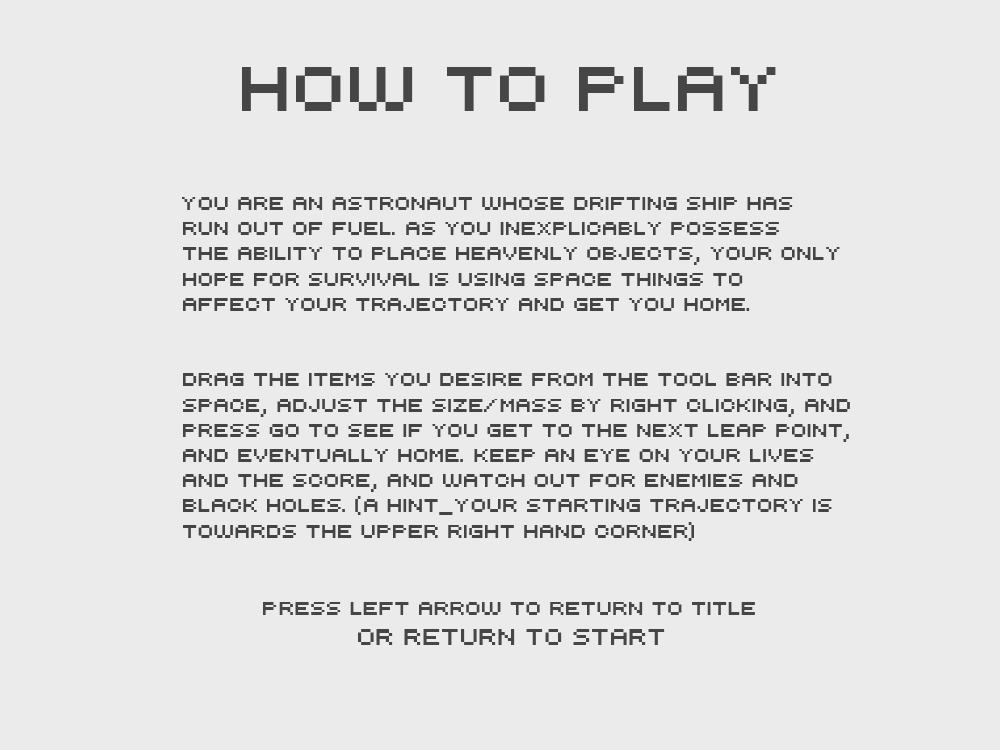
<style>
.page{position:relative;width:1000px;height:750px;background:#ebebeb}
.page>*{position:absolute;margin:0}
.t1{font:71px "automat";color:#464646}
.t2{font:21px "automat";color:#444444}
.t3{font:21px "automat";color:#464646}
.t4{font:25px "automat";color:#464646}
</style>
<div class="page">
<p class="t1" style="left:242px;top:67px;width:534px;height:44px">How to Play</p>
<p class="t2" style="left:182px;top:197px;width:668px;height:344px">You are an astronaut whose drifting ship has<br>run out of fuel. as you inexplicably possess <br>the ability to place heavenly objects, your only<br>hope for survival is using space things to<br>affect your trajectory and get you home.<br><br><br>drag the items you desire from the tool bar into <br>space, adjust the size/mass by right clicking, and<br>press go to see if you get to the next leap point,<br>and eventually home. keep an eye on your lives<br>and the score, and watch out for enemies and<br>black holes. (a hint_Your starting trajectory is<br>towards the upper right hand corner)</p>
<p class="t3" style="left:263px;top:602px;width:492px;height:43px">Press left arrow to return to title<br><span class="t4">          or return to start</span></p>
</div>
